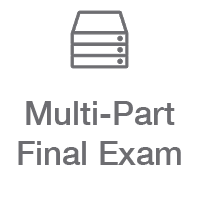
<style>
.page{position:relative;width:200px;height:200px;background:#ffffff}
.page>*{position:absolute;margin:0}
.t1{font:33px "HelveticaNeue-Medium";color:#6d6d71}
</style>
<div class="page">
<p class="t1" style="left:18px;top:101px;width:163px;height:64px;text-align:center">Multi-Part<br>Final Exam</p>
</div>
